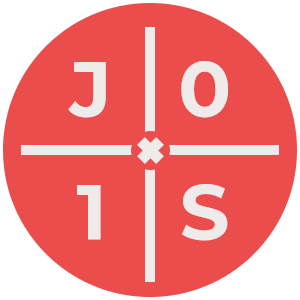
<style>
.page{position:relative;width:300px;height:300px;background:#eb4d4d}
.page>*{position:absolute;margin:0}
.t1{font:78px "Montserrat-Bold";letter-spacing:0.05em;color:#f0ebeb;text-transform:uppercase}
</style>
<div class="page">
<p class="t1" style="left:68px;top:62px;width:38px;height:56px">j</p>
<p class="t1" style="left:181px;top:61px;width:47px;height:57px">0</p>
<p class="t1" style="left:77px;top:185px;width:24px;height:55px">1</p>
<p class="t1" style="left:182px;top:184px;width:46px;height:57px">S</p>
</div>
